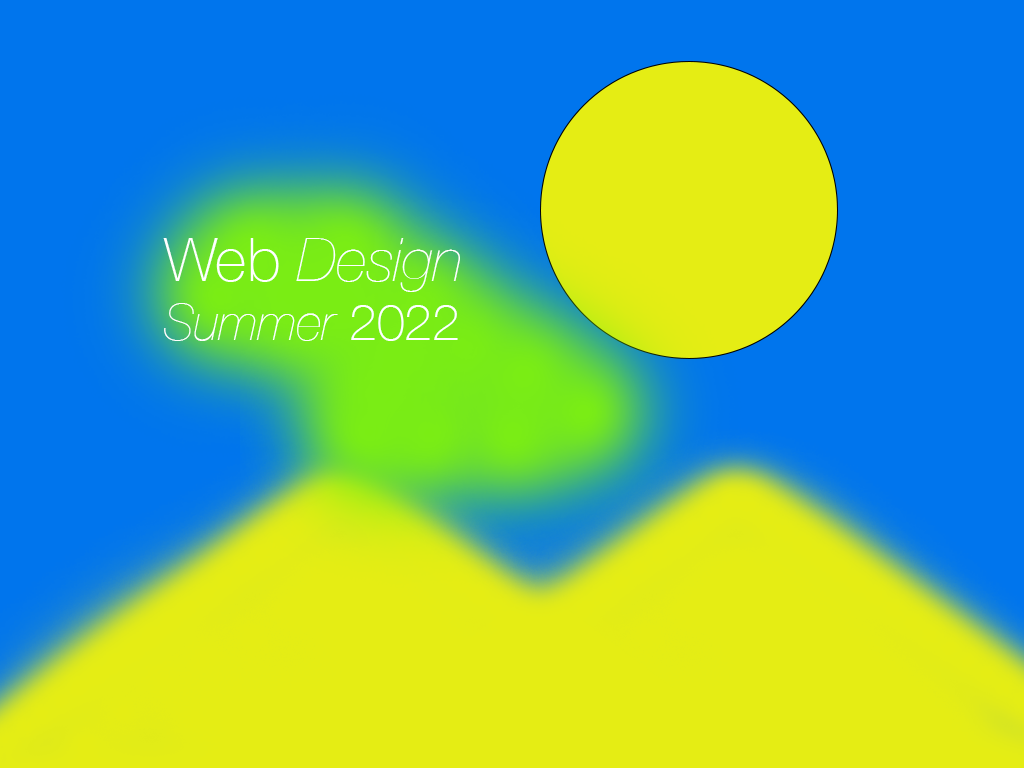
<style>
.page{position:relative;width:1024px;height:768px;background:#0075ed}
.page>*{position:absolute;margin:0}
.t1{font:60px/59px "HelveticaNeue-UltraLightItalic";color:#ffffff}
.t2{font:60px/59px "HelveticaNeue-Thin";color:#ffffff}
.t3{font:50px/59px "HelveticaNeue-UltraLightItalic";color:#ffffff}
.t4{font:50px/59px "HelveticaNeue-Thin";color:#ffffff}
</style>
<div class="page">
<p class="t1" style="left:163px;top:238px;width:297px;height:103px"><span class="t2">Web </span>Design<br><span class="t3">Summer </span><span class="t4">2022</span></p>
</div>
